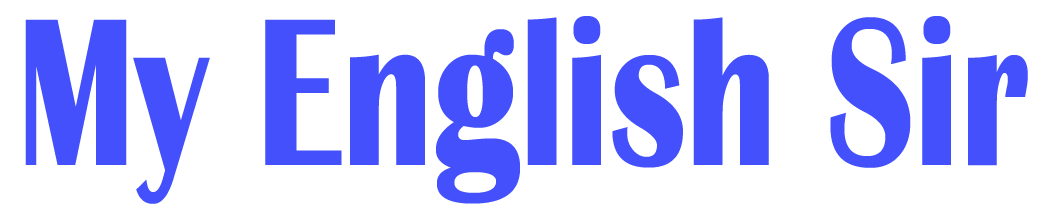
<style>
.page{position:relative;width:1054px;height:222px;background:#ffffff}
.page>*{position:absolute;margin:0}
.t1{font:218px "BritannicBold";color:#4350fc;scale:0.74 1}
</style>
<div class="page">
<p class="t1" style="left:25px;top:16px;width:1003px;height:188px">My English Sir</p>
</div>
